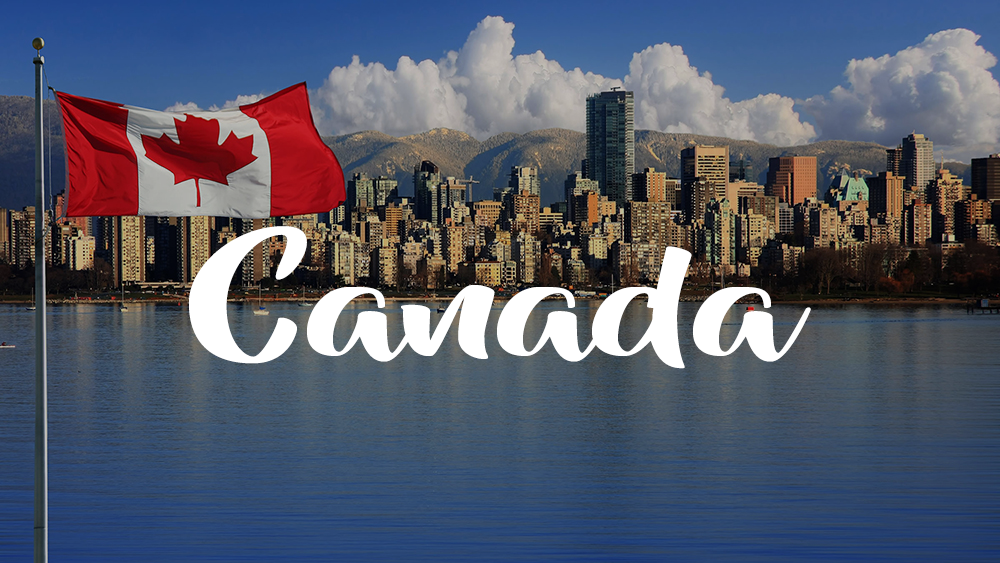
<style>
.page{position:relative;width:1000px;height:563px}
.page>*{position:absolute;margin:0}
.t1{font:128.5px "BeyondTheMountains";letter-spacing:-0.02em;color:#ffffff;scale:1.53 1}
</style>
<div class="page">
<p class="t1" style="left:188px;top:226px;width:623px;height:143px">Canada</p>
</div>
